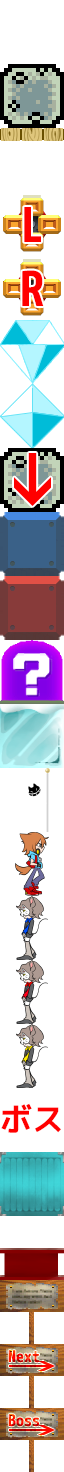
<style>
.page{position:relative;width:64px;height:1472px;background:#ffffff}
.page>*{position:absolute;margin:0}
.t1{font:48px "mplus-1m-bold";color:#ff0000}
.t2{font:32px "mplus-1m-bold";color:#ff0000}
.t3{font:16px "mplus-1m-bold"}
</style>
<div class="page">
<p class="t1" style="left:24px;top:207px;width:17px;height:35px">L</p>
<p class="t1" style="left:22px;top:270px;width:22px;height:36px">R</p>
<p class="t2" style="left:1px;top:1103px;width:60px;height:30px">ボス</p>
<p class="t3" style="left:8px;top:1350px;width:31px;height:13px">Next</p>
<p class="t3" style="left:8px;top:1414px;width:31px;height:13px">Boss</p>
</div>
